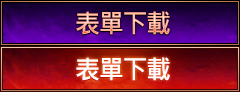
<style>
.page{position:relative;width:240px;height:92px}
.page>*{position:absolute;margin:0}
.t1{font:26px "MicrosoftJhengHeiBold";letter-spacing:-0.05em;scale:0.96 1}
.t2{font:26px "MicrosoftJhengHeiBold";letter-spacing:-0.05em;color:#ffffff;scale:0.96 1}
</style>
<div class="page">
<p class="t1" style="left:76px;top:11px;width:94px;height:24px">表單下載</p>
<p class="t2" style="left:76px;top:57px;width:94px;height:24px">表單下載</p>
</div>
